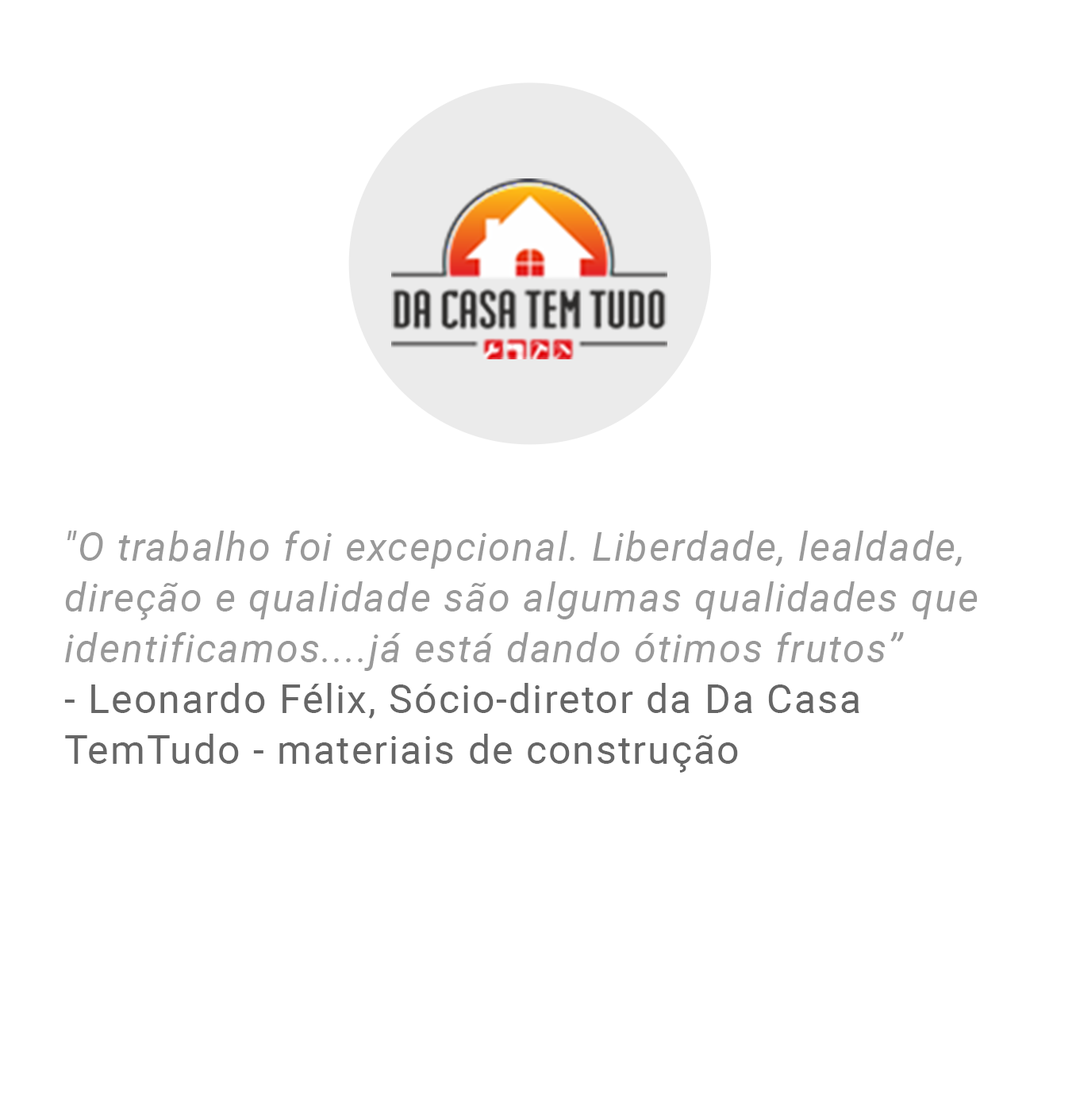
<style>
.page{position:relative;width:1076px;height:1108px;background:#ffffff}
.page>*{position:absolute;margin:0}
.t1{font:39.7px/50.8px "Roboto-Italic";letter-spacing:0.04em;color:#999999}
.t2{font:39.7px/50.8px "Roboto-Regular";letter-spacing:0.04em;color:#666666}
</style>
<div class="page">
<p class="t1" style="left:64px;top:531px;width:913px;height:242px">"O trabalho foi excepcional. Liberdade, lealdade, direção e qualidade são algumas qualidades que identificamos....já está dando ótimos frutos”<br><span class="t2">- Leonardo Félix, Sócio-diretor da Da Casa TemTudo - materiais de construção</span></p>
</div>
